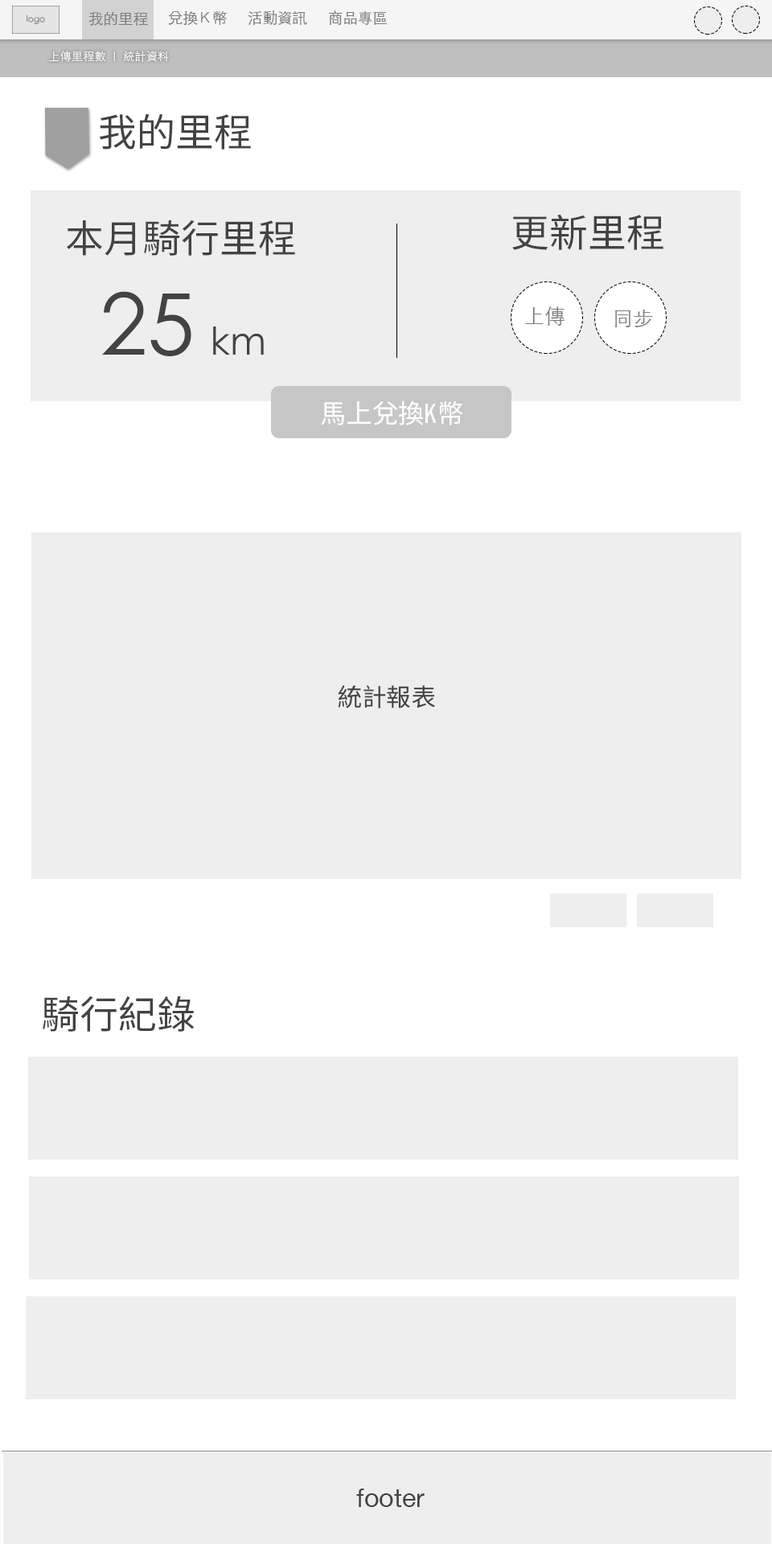
<style>
.page{position:relative;width:772px;height:1544px;background:#eeeeee}
.page>*{position:absolute;margin:0}
.t1{font:8.6px "STHeitiTC-Light";color:#7d7d7d}
.t2{font:14.9px "STHeitiTC-Light";color:#7d7d7d}
.t3{font:11.5px "STHeitiTC-Light";color:#ffffff}
.t4{font:38.6px "NotoSansMonoCJKtc-Regular";color:#434343}
.t5{font:86.2px "STHeitiTC-Light";color:#434343}
.t6{font:20.3px "STHeitiTC-Light";color:#7d7d7d}
.t7{font:38.6px "STHeitiTC-Light";color:#434343}
.t8{font:26.1px "NotoSansMonoCJKtc-Regular";color:#ffffff}
.t9{font:24.6px "NotoSansMonoCJKtc-Regular";color:#434343}
.t10{font:26px "HelveticaNeue";color:#434343}
</style>
<div class="page">
<p class="t1" style="left:27px;top:15px;width:18px;height:9px">logo</p>
<p class="t1" style="left:27px;top:15px;width:18px;height:9px">logo</p>
<p class="t2" style="left:88px;top:11px;width:60px;height:15px">我的里程</p>
<p class="t2" style="left:168px;top:11px;width:59px;height:14px">兌換Ｋ幣</p>
<p class="t2" style="left:248px;top:10px;width:59px;height:15px">活動資訊</p>
<p class="t2" style="left:329px;top:10px;width:58px;height:15px">商品專區</p>
<p class="t3" style="left:49px;top:51px;width:120px;height:11px">上傳里程數 ｜ 統計資料</p>
<p class="t4" style="left:100px;top:113px;width:151px;height:37px">我的里程</p>
<p class="t4" style="left:67px;top:220px;width:228px;height:36px">本月騎行里程</p>
<p class="t4" style="left:512px;top:214px;width:152px;height:36px">更新里程</p>
<p class="t5" style="left:102px;top:291px;width:89px;height:65px">25</p>
<p class="t6" style="left:525px;top:306px;width:40px;height:20px">上傳</p>
<p class="t6" style="left:615px;top:310px;width:38px;height:17px">同步</p>
<p class="t7" style="left:213px;top:327px;width:51px;height:28px">km</p>
<p class="t8" style="left:321px;top:401px;width:142px;height:24px">馬上兌換K幣</p>
<p class="t9" style="left:338px;top:685px;width:97px;height:24px">統計報表</p>
<p class="t4" style="left:43px;top:996px;width:151px;height:36px">騎行紀錄</p>
<p class="t10" style="left:356px;top:1489px;width:69px;height:18px">footer</p>
</div>
